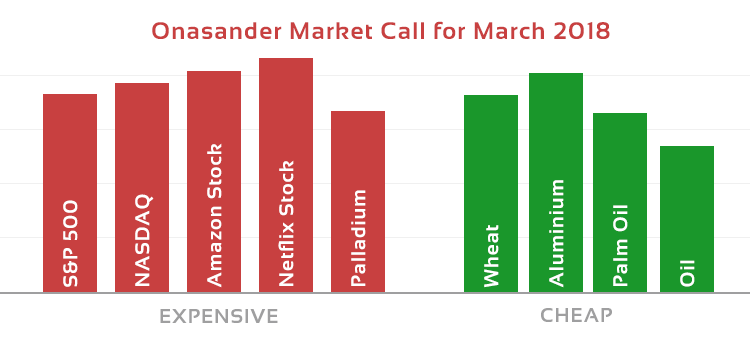
<style>
.page{position:relative;width:750px;height:352px;background:#ffffff}
.page>*{position:absolute;margin:0}
.t1{font:24px "Sansation-Bold";letter-spacing:0.05em;color:#c84040}
.t2{font:20px "Sansation-Bold";letter-spacing:0.05em;color:#ffffff}
.t3{font:20px "Sansation-Bold";letter-spacing:0.05em;color:#9f9fa0}
</style>
<div class="page">
<p class="t1" style="left:152px;top:21px;width:458px;height:18px">Onasander Market Call for March 2018</p>
<p class="t2" style="left:207px;top:143px;width:15px;height:145px;rotate:-90deg">Amazon Stock</p>
<p class="t2" style="left:278px;top:160px;width:16px;height:126px;rotate:-90deg">Netflix Stock</p>
<p class="t2" style="left:549px;top:180px;width:15px;height:108px;rotate:-90deg">Aluminium</p>
<p class="t2" style="left:135px;top:194px;width:19px;height:92px;rotate:-90deg">NASDAQ</p>
<p class="t2" style="left:351px;top:190px;width:15px;height:96px;rotate:-90deg">Palladium</p>
<p class="t2" style="left:63px;top:200px;width:15px;height:87px;rotate:-90deg">S&amp;P 500</p>
<p class="t2" style="left:613px;top:205px;width:15px;height:81px;rotate:-90deg">Palm Oil</p>
<p class="t2" style="left:484px;top:225px;width:15px;height:63px;rotate:-90deg">Wheat</p>
<p class="t2" style="left:680px;top:260px;width:15px;height:27px;rotate:-90deg">Oil</p>
<p class="t3" style="left:160px;top:309px;width:118px;height:14px">EXPENSIVE</p>
<p class="t3" style="left:541px;top:308px;width:71px;height:14px">CHEAP</p>
</div>
